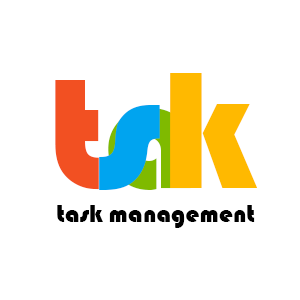
<style>
.page{position:relative;width:300px;height:300px;background:#ffffff}
.page>*{position:absolute;margin:0}
.t1{font:172px "Bauhaus93";color:#00a4ef}
.t2{font:172px "Bauhaus93";color:#ffb900}
.t3{font:161.6px "Bauhaus93"}
.t4{font:25.1px "Bauhaus93";color:#000000}
</style>
<div class="page">
<p class="t1" style="left:99px;top:73px;width:158px;height:117px">s<span class="t2">k</span></p>
<p class="t3" style="left:55px;top:80px;width:136px;height:110px">ta</p>
<p class="t4" style="left:57px;top:205px;width:198px;height:23px">task management</p>
</div>
